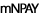
<style>
.page{position:relative;width:39px;height:16px;background:#ffffff}
.page>*{position:absolute;margin:0}
.t1{font:13px "MalgunGothicRegular";letter-spacing:-0.1em;color:#000000;font-weight:bold}
</style>
<div class="page">
<p class="t1" style="left:0px;top:3px;width:39px;height:10px">mNPAY</p>
</div>
